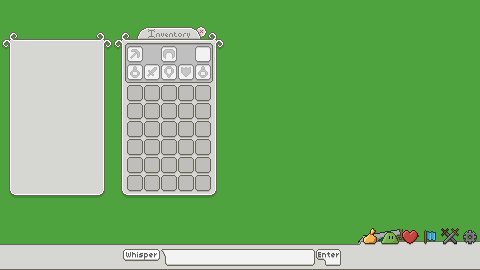
<style>
.page{position:relative;width:480px;height:270px;background:#4fa33f}
.page>*{position:absolute;margin:0}
.t1{font:14.7px "Indicity2";color:#808080}
.t2{font:8px "04b03";color:#5f5f5f}
.t3{font:8px "04b03";color:#5e5e5e}
</style>
<div class="page">
<p class="t1" style="left:148px;top:29px;width:42px;height:9px">Inventory</p>
<p class="t2" style="left:126px;top:252px;width:31px;height:7px">Whisper</p>
<p class="t3" style="left:318px;top:252px;width:21px;height:5px">Enter</p>
</div>
